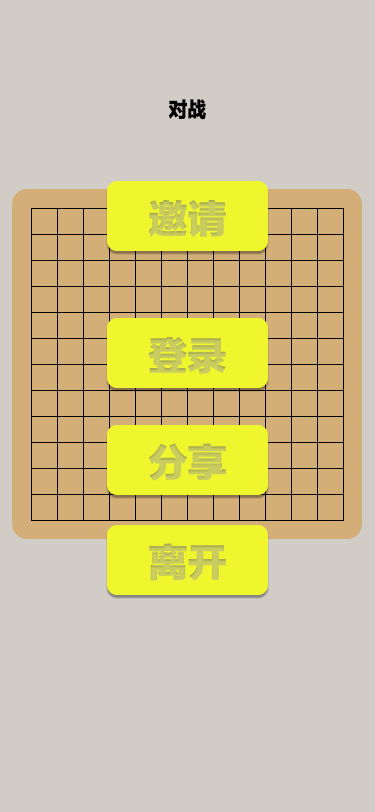
<style>
.page{position:relative;width:375px;height:812px;background:#d1ccc6}
.page>*{position:absolute;margin:0}
.t1{font:39.1px "FZLTTHK--GBK1-0";color:#c9cd5f}
</style>
<div class="page">
<p class="t1" style="left:148px;top:200px;width:78px;height:38px">邀请</p>
<p class="t1" style="left:148px;top:337px;width:78px;height:37px">登录</p>
<p class="t1" style="left:148px;top:443px;width:78px;height:38px">分享</p>
<p class="t1" style="left:149px;top:543px;width:77px;height:38px">离开</p>
</div>
